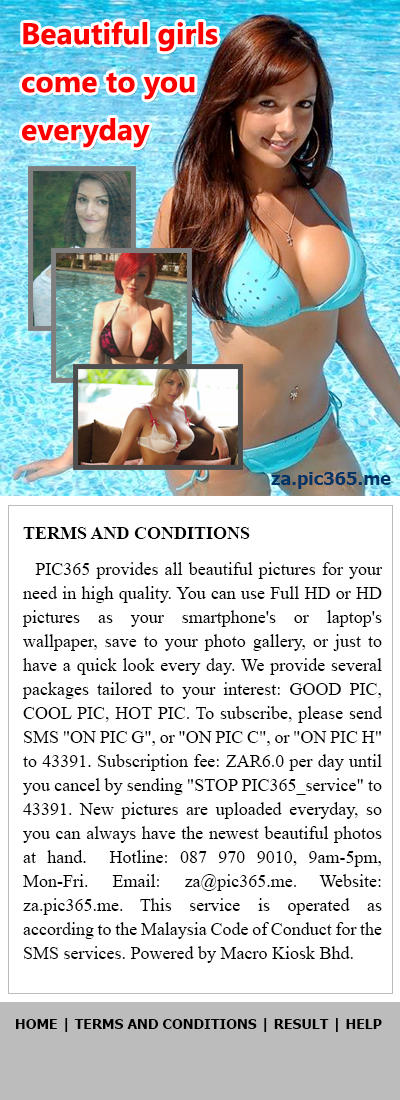
<style>
.page{position:relative;width:400px;height:1100px;background:#ffffff}
.page>*{position:absolute;margin:0}
.t1{font:30px/48px "SegoeUI-Bold";color:#fd0000}
.t2{font:18px "Tahoma-Bold";color:#003366}
.t3{font:18px/24px "TimesNewRomanPSMT";color:#000000}
.t4{font:18px/36px "TimesNewRomanPS-BoldMT";color:#000000}
.t5{font:14px "Tahoma-Bold";color:#000000}
</style>
<div class="page">
<p class="t1" style="left:22px;top:21px;width:196px;height:127px">Beautiful girls <br>come to you <br>everyday</p>
<p class="t2" style="left:271px;top:472px;width:120px;height:17px">za.pic365.me</p>
<p class="t3" style="left:22px;top:527px;width:361px;height:436px;text-align:justify"><span class="t4">TERMS AND CONDITIONS<br>  </span>PIC365 provides all beautiful pictures for your need in high quality. You can use Full HD or HD pictures as your smartphone's or laptop's wallpaper, save to your photo gallery, or just to have a quick look every day. We provide several packages tailored to your interest: GOOD PIC, COOL PIC, HOT PIC. To subscribe, please send SMS "ON PIC G", or "ON PIC C", or "ON PIC H" to 43391. Subscription fee: ZAR6.0 per day until you cancel by sending "STOP PIC365_service" to 43391. New pictures are uploaded everyday, so you can always have the newest beautiful photos at hand.  Hotline: 087 970 9010, 9am-5pm, Mon-Fri. Email: za@pic365.me. Website: za.pic365.me. This service is operated as according to the Malaysia Code of Conduct for the SMS services. Powered by Macro Kiosk Bhd.</p>
<p class="t5" style="left:16px;top:1018px;width:366px;height:14px">HOME | TERMS AND CONDITIONS | RESULT | HELP</p>
</div>
